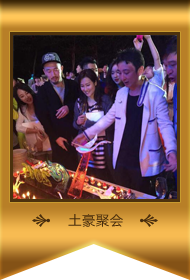
<style>
.page{position:relative;width:190px;height:280px}
.page>*{position:absolute;margin:0}
.t1{font:13.2px "MicrosoftYaHei";letter-spacing:0.05em;color:#472c0c}
</style>
<div class="page">
<p class="t1" style="left:68px;top:214px;width:55px;height:13px">土豪聚会</p>
</div>
